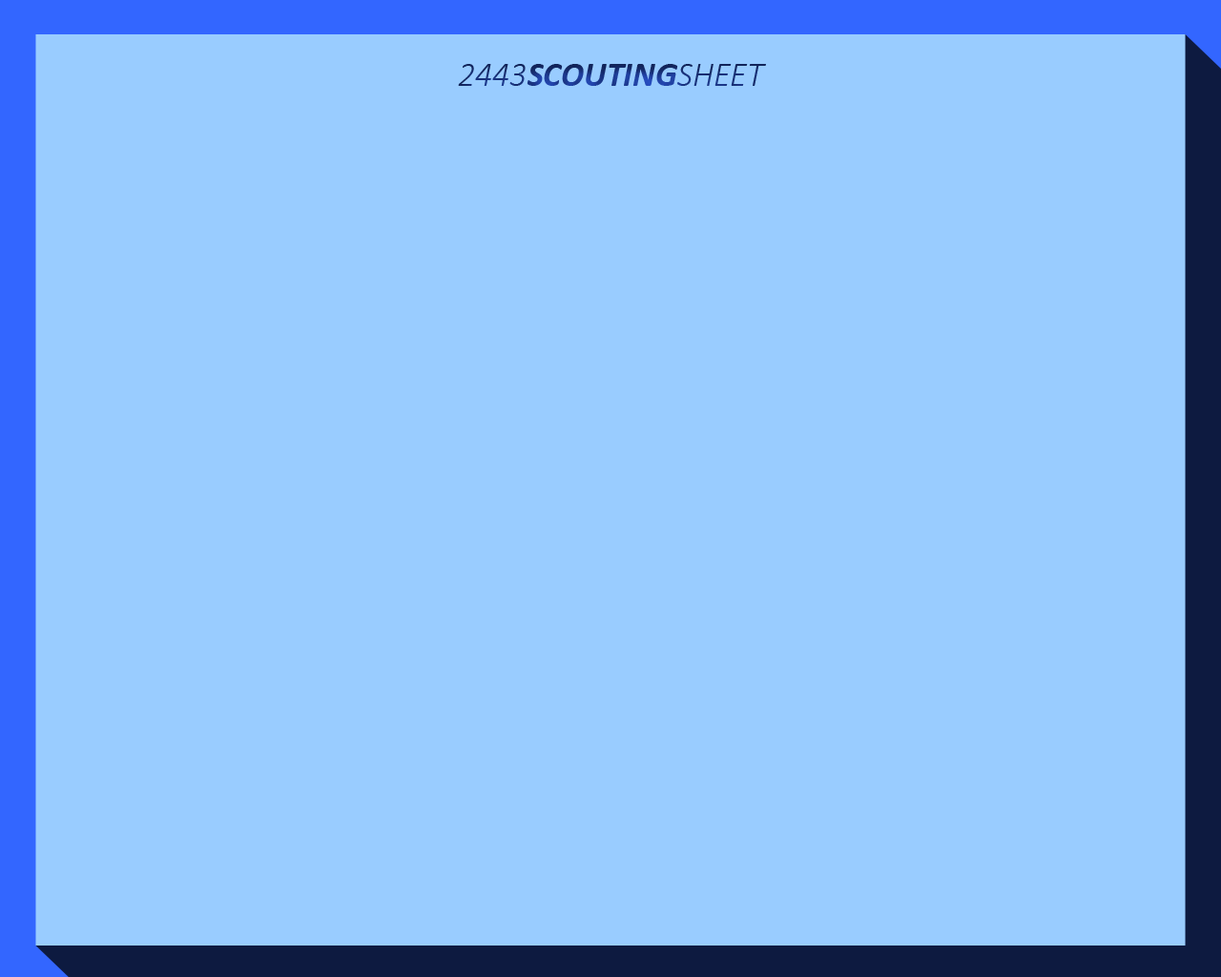
<style>
.page{position:relative;width:1221px;height:977px;background:#99ccff}
.page>*{position:absolute;margin:0}
.t1{font:34.3px "Calibri-BoldItalic"}
.t2{font:34.3px "Calibri-LightItalic"}
</style>
<div class="page">
<p class="t1" style="left:458px;top:64px;width:308px;height:22px"><span class="t2">2443</span>SCOUTING<span class="t2">SHEET</span></p>
</div>
